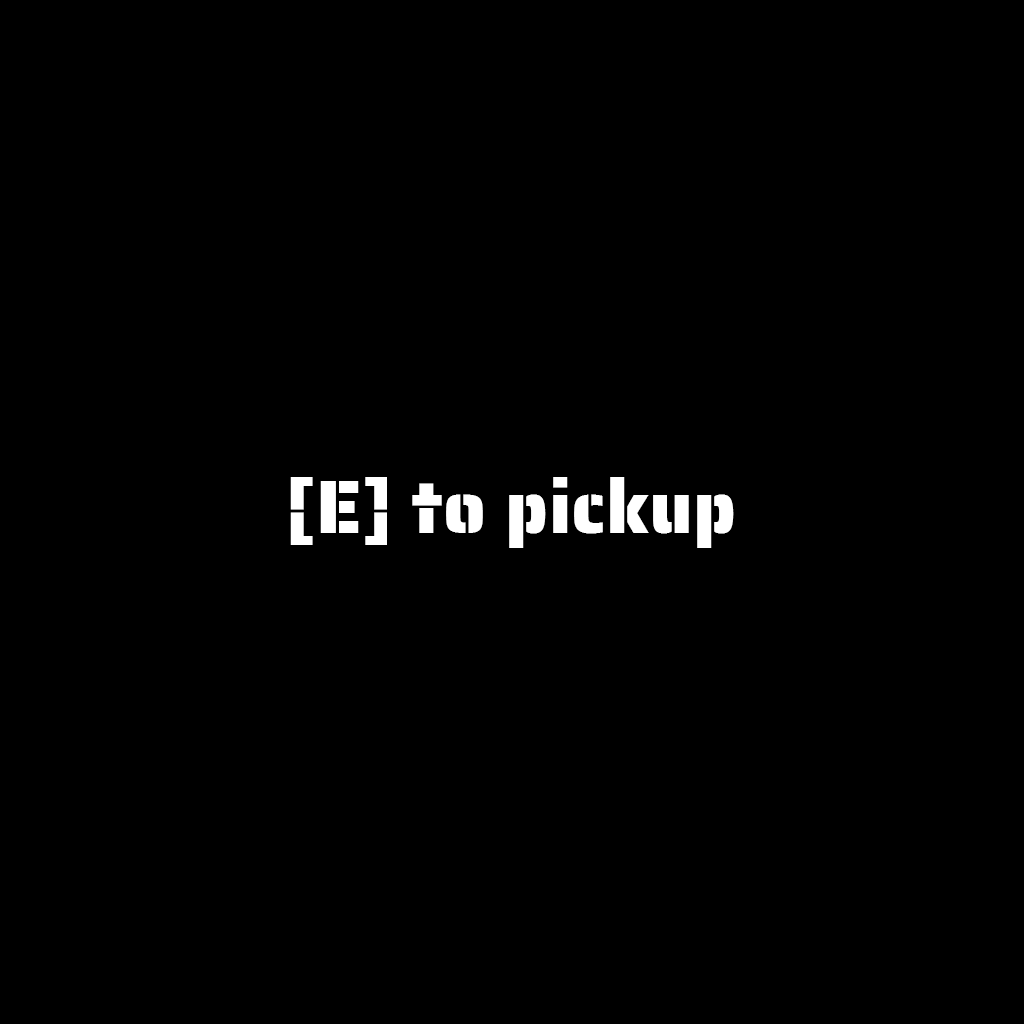
<style>
.page{position:relative;width:1024px;height:1024px;background:#000000}
.page>*{position:absolute;margin:0}
.t1{font:75px "SairaStencilOne-Regular";color:#ffffff}
</style>
<div class="page">
<p class="t1" style="left:290px;top:477px;width:444px;height:71px">[E] to pickup</p>
</div>
